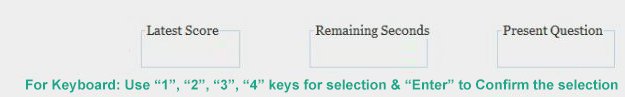
<style>
.page{position:relative;width:625px;height:97px;background:#eeeeee}
.page>*{position:absolute;margin:0}
.t1{font:14px "Arial-BoldMT";color:#19a88c}
</style>
<div class="page">
<p class="t1" style="left:26px;top:79px;width:592px;height:14px">For Keyboard: Use “1”, “2”, “3”, “4” keys for selection &amp; “Enter” to Confirm the selection</p>
</div>
